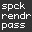
<style>
.page{position:relative;width:32px;height:32px;background:#333333}
.page>*{position:absolute;margin:0}
.t1{font:9px/10.4px "Monaco";letter-spacing:0.06em;color:#ffffff}
.t2{font:9px/8.4px "Monaco";letter-spacing:0.06em;color:#ffffff}
</style>
<div class="page">
<p class="t1" style="left:2px;top:2px;width:29px;height:28px"><span class="t2">spck<br></span>rendr<br><span class="t2">pass</span></p>
</div>
